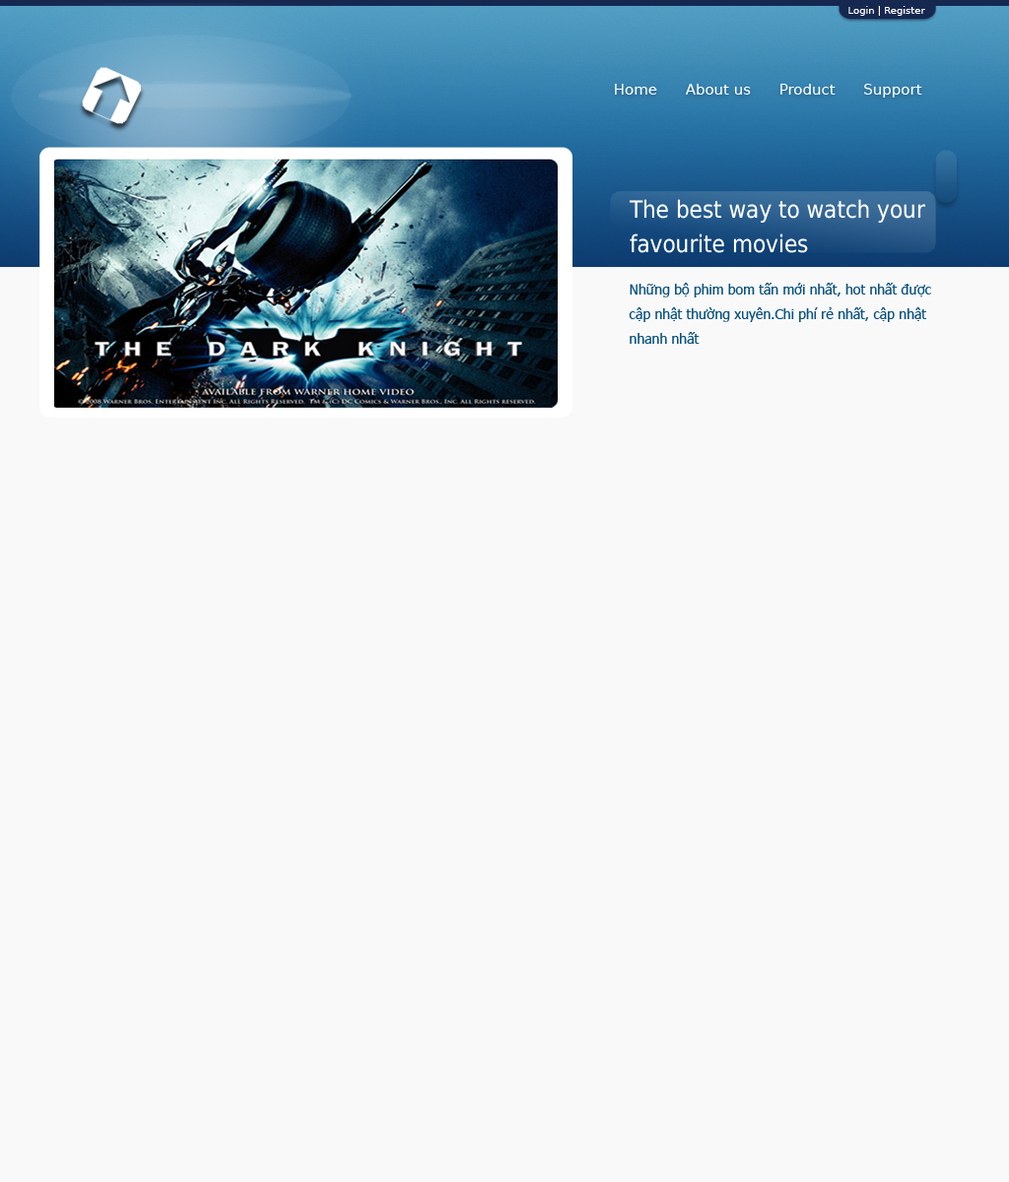
<style>
.page{position:relative;width:1009px;height:1182px;background:#f9f9f9}
.page>*{position:absolute;margin:0}
.t1{font:9.9px "DejaVuSans";color:#ffffff}
.t2{font:14.8px "DejaVuSans";color:#ffffff}
.t3{font:23.6px/34.5px "DejaVuSansCondensed";color:#ffffff}
.t4{font:13.8px/24.6px "Tahoma";color:#0b537f}
.t5{font:13.8px/24.6px "DejaVuSansCondensed";color:#0b537f}
</style>
<div class="page">
<p class="t1" style="left:848px;top:6px;width:77px;height:10px">Login | Register</p>
<p class="t2" style="left:615px;top:84px;width:307px;height:14px">Home      About us      Product      Support</p>
<p class="t3" style="left:628px;top:199px;width:298px;height:54px;text-align:justify">The best way to watch your<br>favourite movies</p>
<p class="t4" style="left:628px;top:283px;width:304px;height:61px;text-align:justify"><span class="t5">N</span>hững bộ phim bom tấn mới nhất, hot nhất được <br>cập nhật thường xuyên.Chi phí rẻ nhất, cập nhật<br>nhanh nhất</p>
</div>
